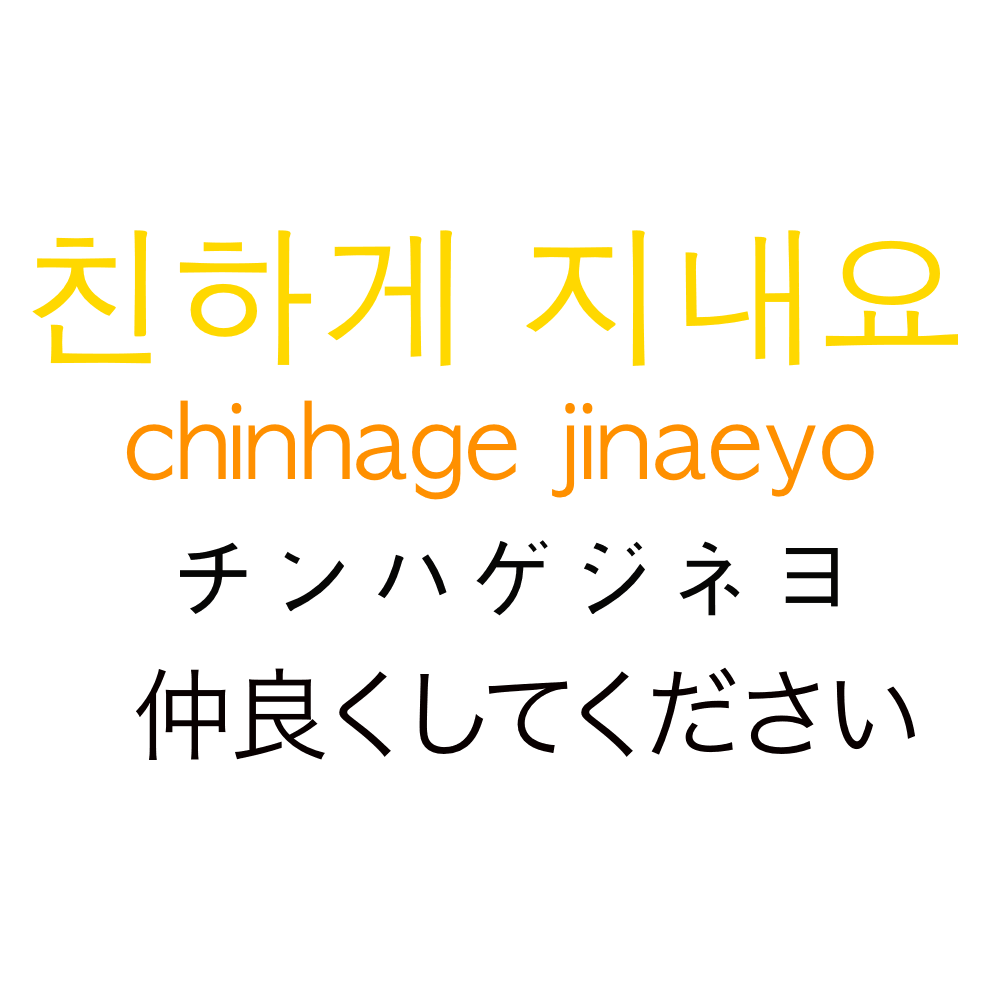
<style>
.page{position:relative;width:1000px;height:1000px;background:#ffffff}
.page>*{position:absolute;margin:0}
.t1{font:150px "AppleGothic";color:#ffd800}
.t2{font:100px "AppleGothic";color:#ff9000}
.t3{font:100px "AppleGothic";color:#060605}
.t4{font:100px "HiraKakuProN-W3";color:#080000}
</style>
<div class="page">
<p class="t1" style="left:32px;top:230px;width:926px;height:137px">친하게 지내요</p>
<p class="t2" style="left:126px;top:400px;width:748px;height:100px">chinhage jinaeyo</p>
<p class="t3" style="left:180px;top:540px;width:658px;height:76px">チンハゲジネヨ</p>
<p class="t4" style="left:136px;top:667px;width:779px;height:93px">仲良くしてください</p>
</div>
